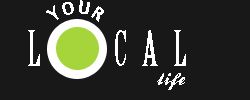
<style>
.page{position:relative;width:250px;height:100px;background:#181818}
.page>*{position:absolute;margin:0}
.t1{font:18px "CharcoalCY";letter-spacing:0.06em;color:#ffffff}
.t2{font:48px "BirchStd";letter-spacing:0.32em;color:#ffffff}
.t3{font:48px "BirchStd";letter-spacing:0.18em;color:#ffffff}
.t4{font:18px "BallparkWeiner";letter-spacing:0.08em;color:#ffffff}
</style>
<div class="page">
<p class="t1" style="left:46px;top:0px;width:58px;height:22px;rotate:-40deg">YOUR</p>
<p class="t2" style="left:28px;top:30px;width:158px;height:36px"><span class="t3">L</span>   CAL</p>
<p class="t4" style="left:157px;top:73px;width:28px;height:17px">life</p>
</div>
